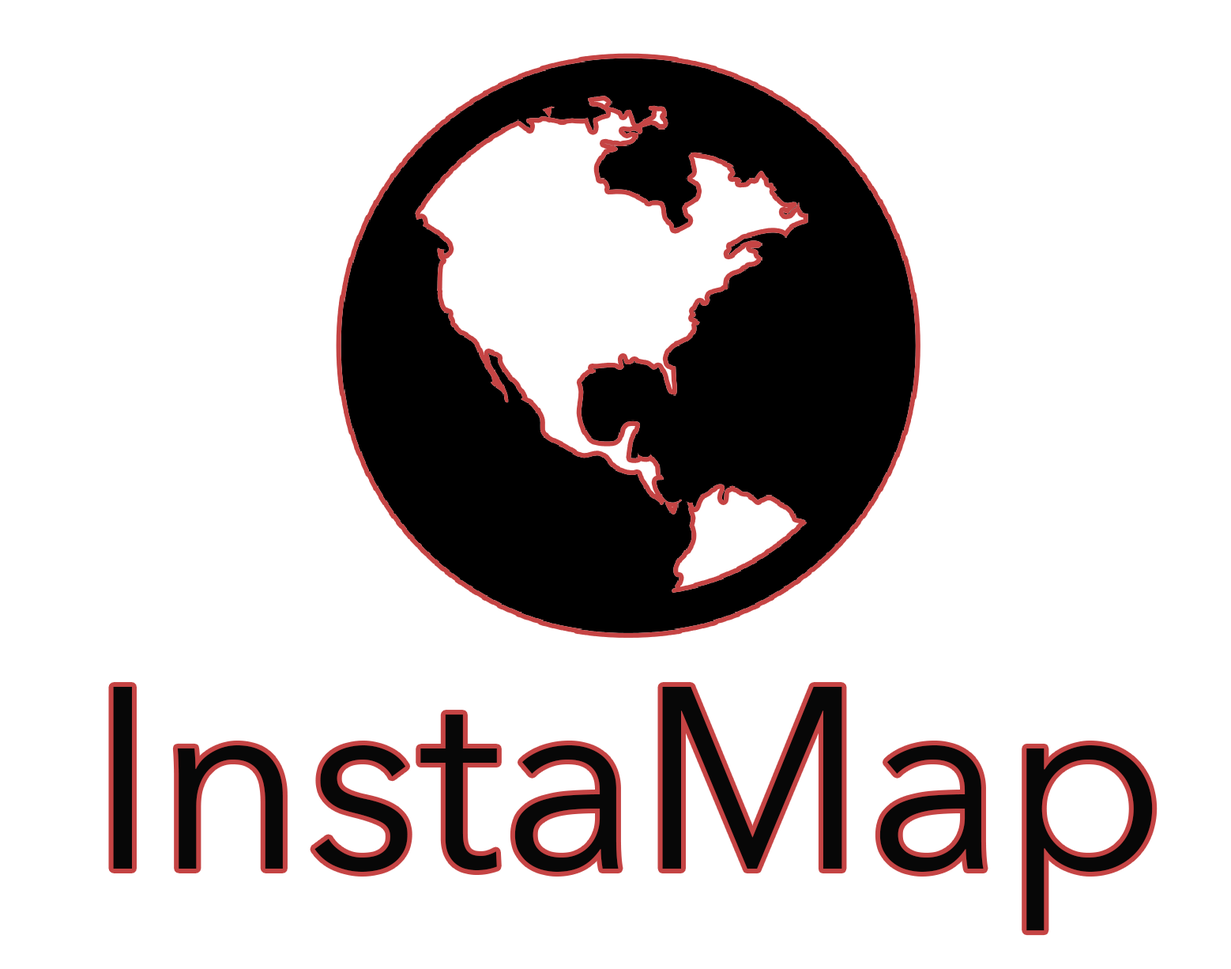
<style>
.page{position:relative;width:1231px;height:969px;background:#ffffff}
.page>*{position:absolute;margin:0}
.t1{font:257px "AvenirNext-Regular";color:#070707}
</style>
<div class="page">
<p class="t1" style="left:113px;top:687px;width:1040px;height:244px">InstaMap</p>
</div>
